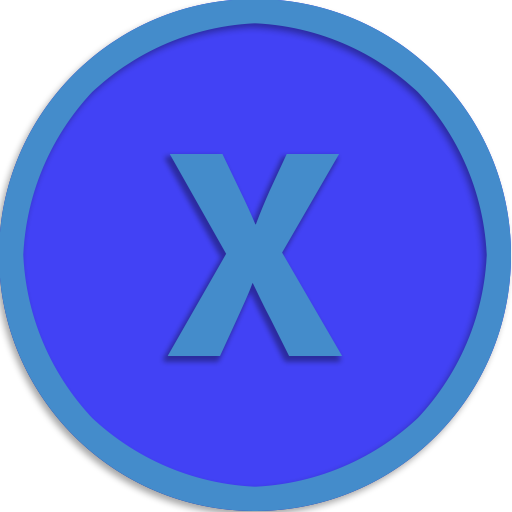
<style>
.page{position:relative;width:512px;height:512px;background:#4242f5}
.page>*{position:absolute;margin:0}
.t1{font:300px "MyriadPro-Bold";color:#448ccb}
</style>
<div class="page">
<p class="t1" style="left:167px;top:154px;width:175px;height:202px">X</p>
</div>
